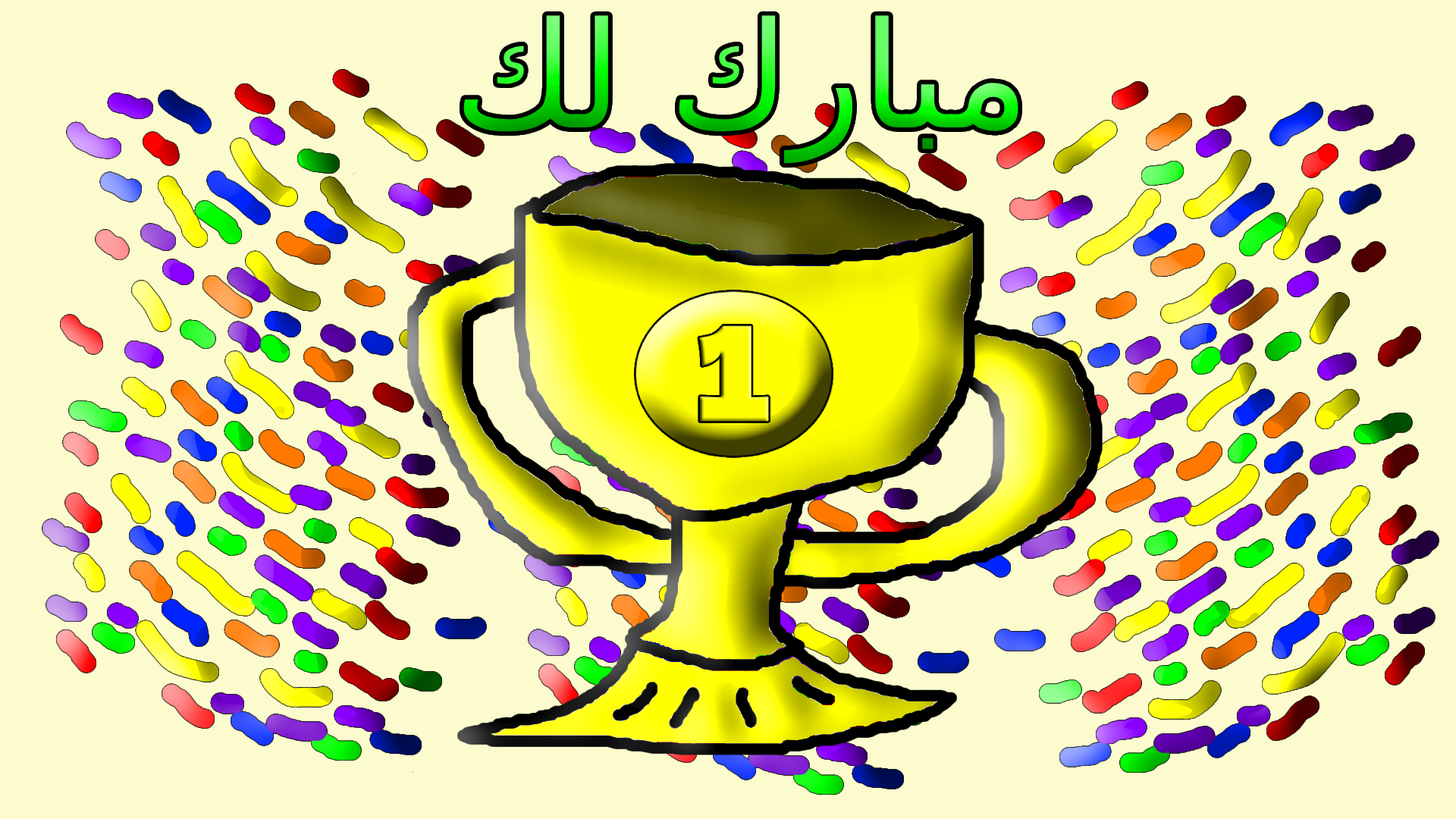
<style>
.page{position:relative;width:1456px;height:819px;background:#fbfbce}
.page>*{position:absolute;margin:0}
.t1{font:147.1px "DejaVuSans"}
</style>
<div class="page">
<p class="t1" style="left:463px;top:15px;width:555px;height:149px">مبارك لك</p>
</div>
